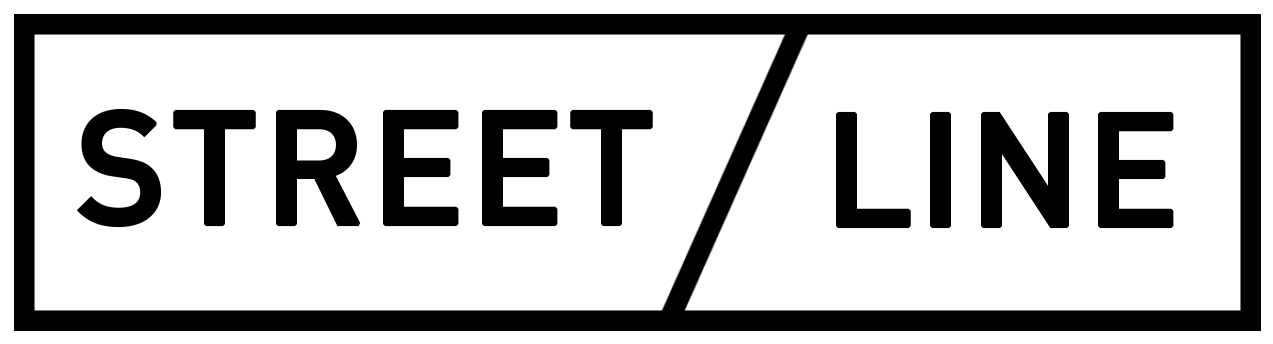
<style>
.page{position:relative;width:1273px;height:344px;background:#ffffff}
.page>*{position:absolute;margin:0}
.t1{font:156.7px "DINPro-Medium";color:#000000;font-weight:bold}
</style>
<div class="page">
<p class="t1" style="left:76px;top:108px;width:577px;height:120px">STREET</p>
<p class="t1" style="left:836px;top:111px;width:338px;height:118px">LINE</p>
</div>
